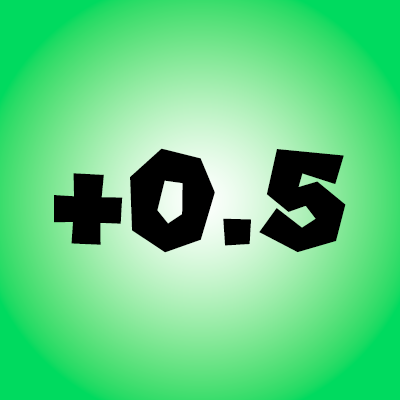
<style>
.page{position:relative;width:400px;height:400px}
.page>*{position:absolute;margin:0}
.t1{font:308px "SuperMario";color:#000000}
</style>
<div class="page">
<p class="t1" style="left:54px;top:148px;width:292px;height:105px">+0.5</p>
</div>
